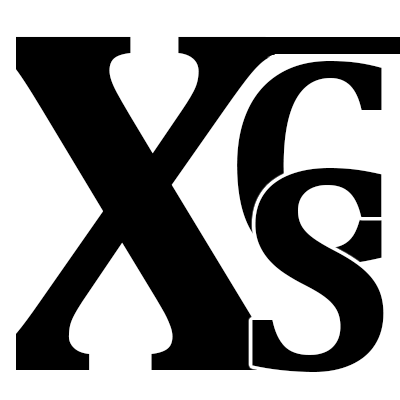
<style>
.page{position:relative;width:400px;height:400px;background:#ffffff}
.page>*{position:absolute;margin:0}
.t1{font:300px "Cambria-Bold";color:#000000}
</style>
<div class="page">
<p class="t1" style="left:237px;top:60px;width:145px;height:205px">C</p>
<p class="t1" style="left:252px;top:167px;width:132px;height:205px">S</p>
</div>
